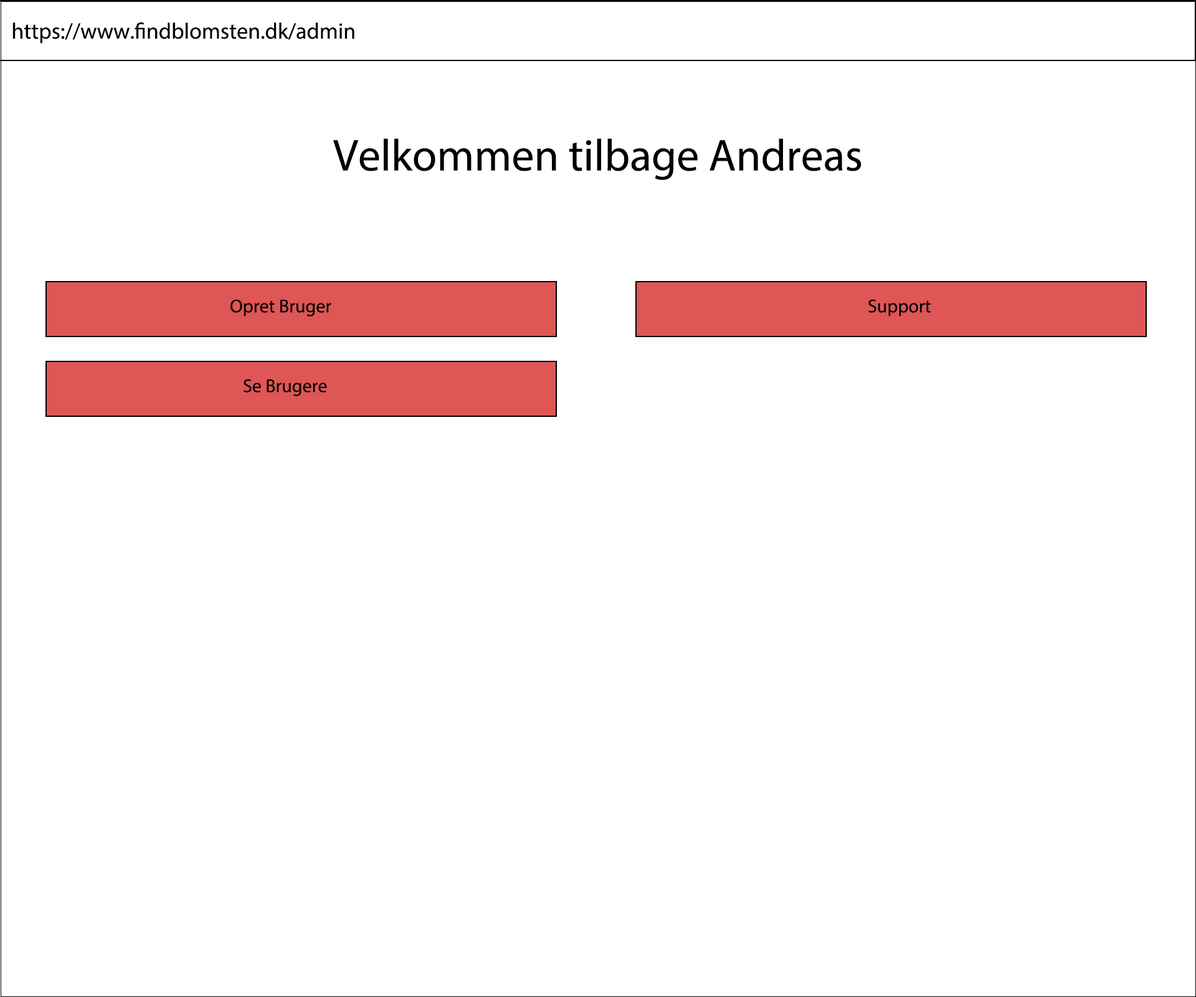
<style>
.page{position:relative;width:1196px;height:997px;background:#ffffff}
.page>*{position:absolute;margin:0}
.t1{font:22.4px "MyriadPro-Regular";color:#000000}
.t2{font:44.9px "MyriadPro-Regular";color:#000000}
.t3{font:18.7px "MyriadPro-Regular";color:#000000}
</style>
<div class="page">
<p class="t1" style="left:12px;top:22px;width:343px;height:22px">https://www.findblomsten.dk/admin</p>
<p class="t2" style="left:333px;top:138px;width:529px;height:42px">Velkommen tilbage Andreas</p>
<p class="t3" style="left:231px;top:299px;width:100px;height:17px">Opret Bruger</p>
<p class="t3" style="left:868px;top:299px;width:63px;height:17px">Support</p>
<p class="t3" style="left:244px;top:379px;width:83px;height:17px">Se Brugere</p>
</div>
